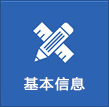
<style>
.page{position:relative;width:109px;height:107px;background:#2c63b2}
.page>*{position:absolute;margin:0}
.t1{font:13.7px "MicrosoftYaHei";letter-spacing:0.07em;color:#ffffff;font-weight:bold}
</style>
<div class="page">
<p class="t1" style="left:24px;top:77px;width:61px;height:14px">基本信息</p>
</div>
